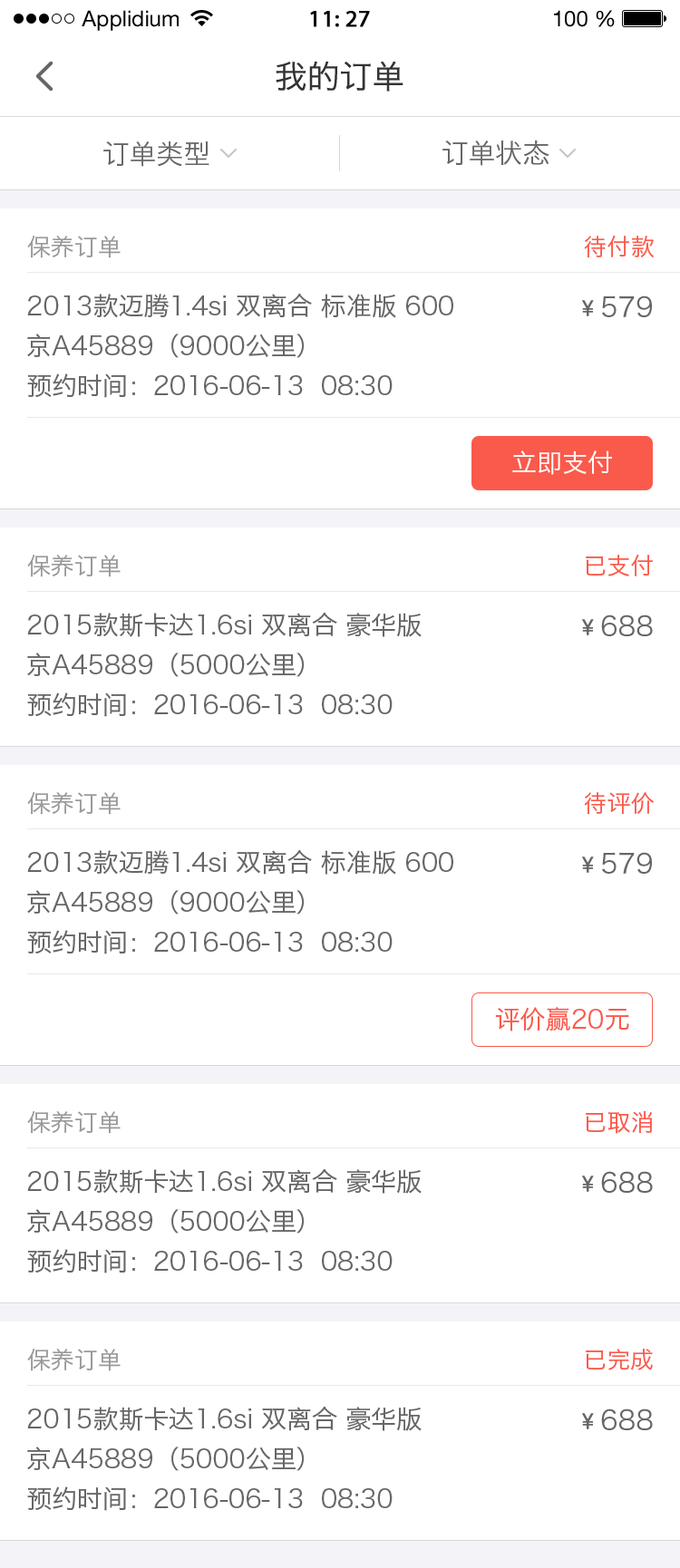
<style>
.page{position:relative;width:680px;height:1568px;background:#ffffff}
.page>*{position:absolute;margin:0}
.t1{font:21.8px "HelveticaNeueLTStd-Roman";color:#000000}
.t2{font:23.6px "MyriadPro-Regular";color:#000000;font-weight:bold}
.t3{font:32.6px "HiraginoSansGB-W3";color:#333333}
.t4{font:27.2px "HiraginoSansGB-W3";color:#666666}
.t5{font:23.6px "HiraginoSansGB-W3";color:#999999}
.t6{font:23.6px "HiraginoSansGB-W3";color:#fa5a4b}
.t7{font:25.4px/39.9px "HiraginoSansGB-W3";color:#666666}
.t8{font:21.8px "STHeiti";color:#666666;font-weight:bold}
.t9{font:25.4px "HiraginoSansGB-W3";color:#ffffff}
.t10{font:25.4px "HiraginoSansGB-W3";color:#fa5a4b}
</style>
<div class="page">
<p class="t1" style="left:82px;top:10px;width:97px;height:21px">Applidium</p>
<p class="t2" style="left:310px;top:11px;width:60px;height:16px">11: 27</p>
<p class="t1" style="left:554px;top:10px;width:61px;height:17px">100 %</p>
<p class="t3" style="left:276px;top:61px;width:127px;height:31px">我的订单</p>
<p class="t4" style="left:103px;top:141px;width:106px;height:26px">订单类型</p>
<p class="t4" style="left:442px;top:140px;width:107px;height:26px">订单状态</p>
<p class="t5" style="left:27px;top:235px;width:94px;height:23px">保养订单</p>
<p class="t6" style="left:584px;top:236px;width:69px;height:22px">待付款</p>
<p class="t7" style="left:27px;top:293px;width:426px;height:105px">2013款迈腾1.4si 双离合 标准版 600<br>京A45889（9000公里）<br>预约时间：2016-06-13  08:30</p>
<p class="t4" style="left:582px;top:295px;width:70px;height:22px"><span class="t8">¥ </span>579</p>
<p class="t9" style="left:512px;top:450px;width:100px;height:25px">立即支付</p>
<p class="t5" style="left:27px;top:554px;width:94px;height:23px">保养订单</p>
<p class="t6" style="left:586px;top:555px;width:67px;height:21px">已支付</p>
<p class="t7" style="left:27px;top:612px;width:394px;height:105px">2015款斯卡达1.6si 双离合 豪华版<br>京A45889（5000公里）<br>预约时间：2016-06-13  08:30</p>
<p class="t4" style="left:582px;top:615px;width:71px;height:21px"><span class="t8">¥ </span>688</p>
<p class="t5" style="left:27px;top:791px;width:94px;height:24px">保养订单</p>
<p class="t6" style="left:584px;top:792px;width:69px;height:22px">待评价</p>
<p class="t7" style="left:27px;top:849px;width:426px;height:105px">2013款迈腾1.4si 双离合 标准版 600<br>京A45889（9000公里）<br>预约时间：2016-06-13  08:30</p>
<p class="t4" style="left:582px;top:852px;width:70px;height:22px"><span class="t8">¥ </span>579</p>
<p class="t10" style="left:495px;top:1007px;width:134px;height:24px">评价赢20元</p>
<p class="t5" style="left:27px;top:1110px;width:94px;height:24px">保养订单</p>
<p class="t6" style="left:586px;top:1111px;width:66px;height:23px">已取消</p>
<p class="t7" style="left:27px;top:1168px;width:394px;height:105px">2015款斯卡达1.6si 双离合 豪华版<br>京A45889（5000公里）<br>预约时间：2016-06-13  08:30</p>
<p class="t4" style="left:582px;top:1171px;width:71px;height:22px"><span class="t8">¥ </span>688</p>
<p class="t5" style="left:27px;top:1348px;width:94px;height:23px">保养订单</p>
<p class="t6" style="left:586px;top:1349px;width:67px;height:21px">已完成</p>
<p class="t7" style="left:27px;top:1406px;width:394px;height:105px">2015款斯卡达1.6si 双离合 豪华版<br>京A45889（5000公里）<br>预约时间：2016-06-13  08:30</p>
<p class="t4" style="left:582px;top:1408px;width:71px;height:22px"><span class="t8">¥ </span>688</p>
</div>
